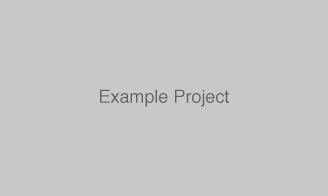
<style>
.page{position:relative;width:328px;height:196px;background:#c8c8c8}
.page>*{position:absolute;margin:0}
.t1{font:18px "Helvetica";color:#646464}
</style>
<div class="page">
<p class="t1" style="left:100px;top:89px;width:129px;height:18px">Example Project</p>
</div>
